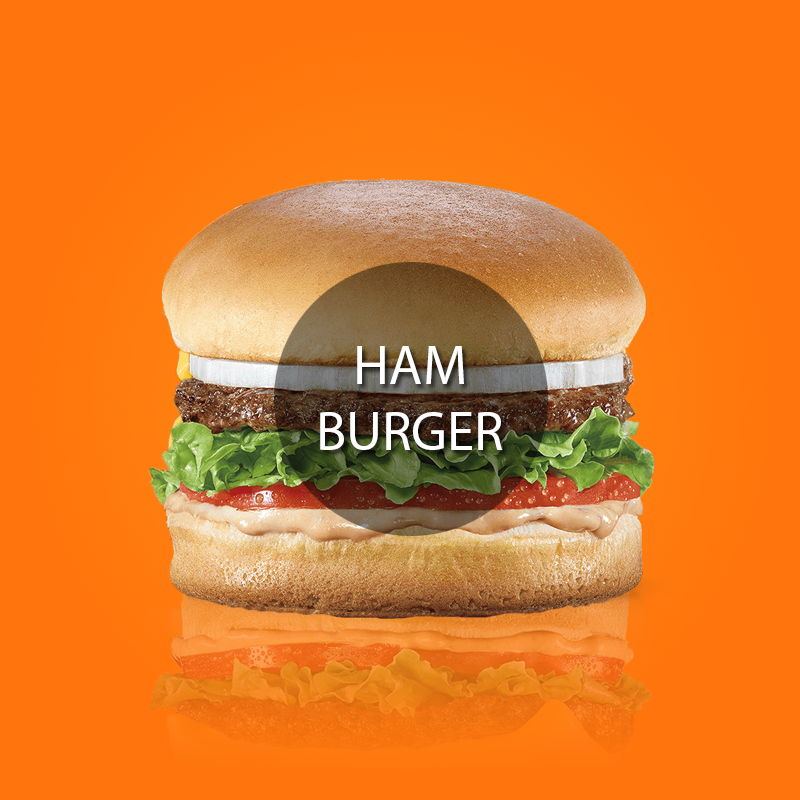
<style>
.page{position:relative;width:800px;height:800px;background:#ff740c}
.page>*{position:absolute;margin:0}
.t1{font:55px "MyriadPro-Regular";color:#ffffff}
</style>
<div class="page">
<p class="t1" style="left:320px;top:346px;width:183px;height:104px;text-align:center">HAM<br>BURGER</p>
</div>
